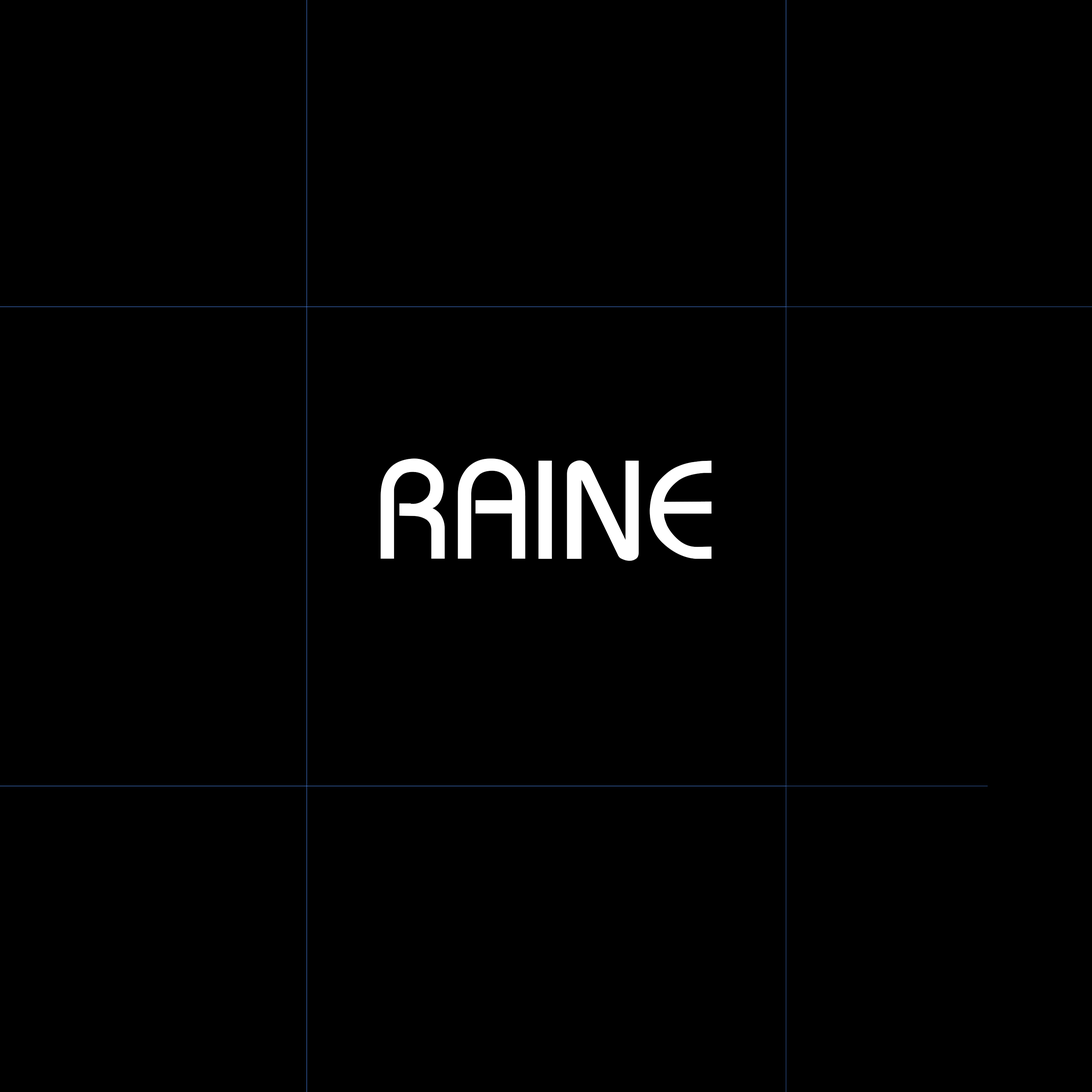
<style>
.page{position:relative;width:1092px;height:1092px;background:#000000}
.page>*{position:absolute;margin:0}
.t1{font:139.9px "Bauhaus";color:#ffffff}
</style>
<div class="page">
<p class="t1" style="left:381px;top:458px;width:330px;height:103px">RAINE</p>
</div>
